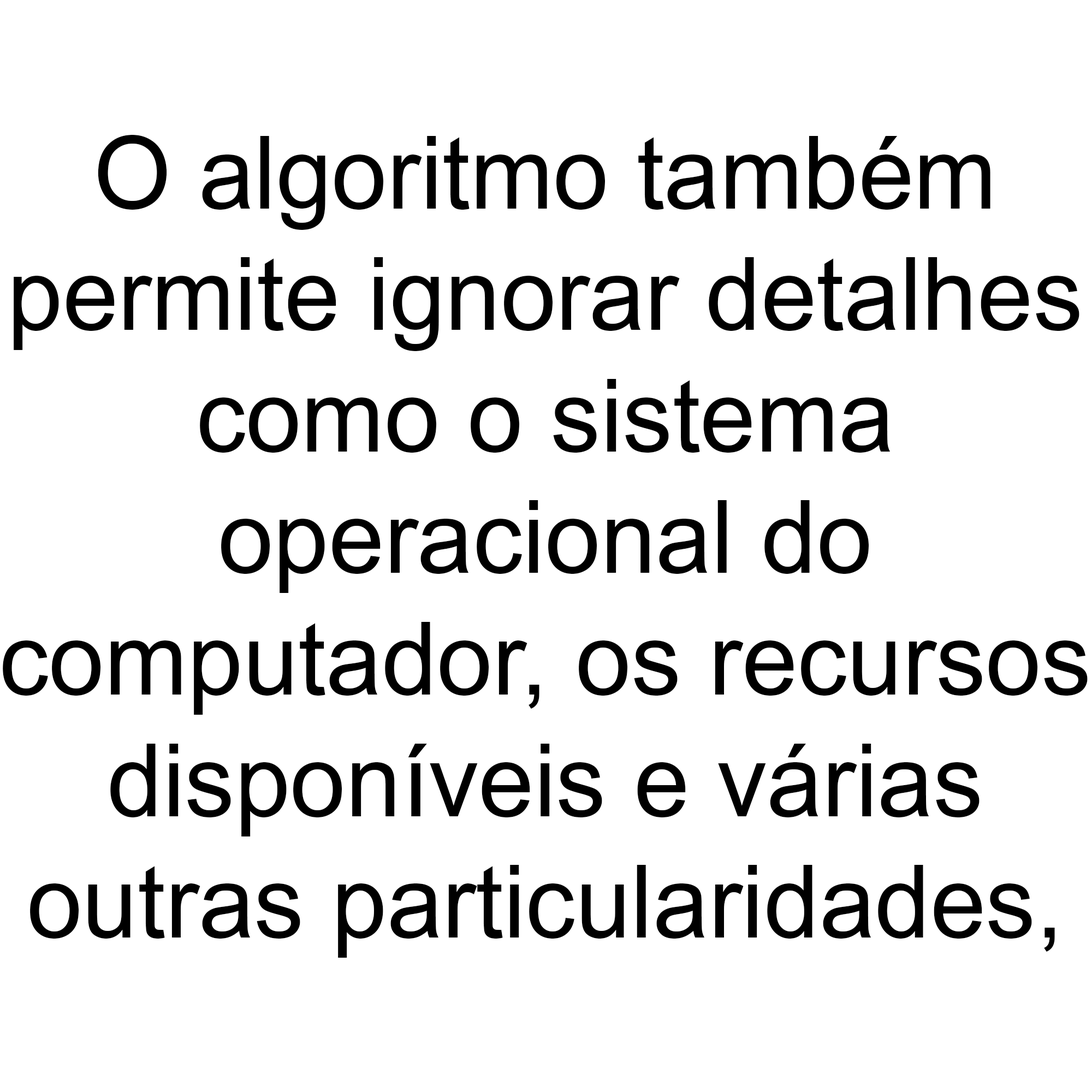
<style>
.page{position:relative;width:1092px;height:1092px;background:#ffffff}
.page>*{position:absolute;margin:0}
.t1{font:101.3px "ArialMT";color:#000000}
</style>
<div class="page">
<p class="t1" style="left:3px;top:135px;width:1085px;height:823px;text-align:center">O algoritmo também<br>permite ignorar detalhes<br>como o sistema<br>operacional do<br>computador, os recursos<br>disponíveis e várias<br>outras particularidades,</p>
</div>
